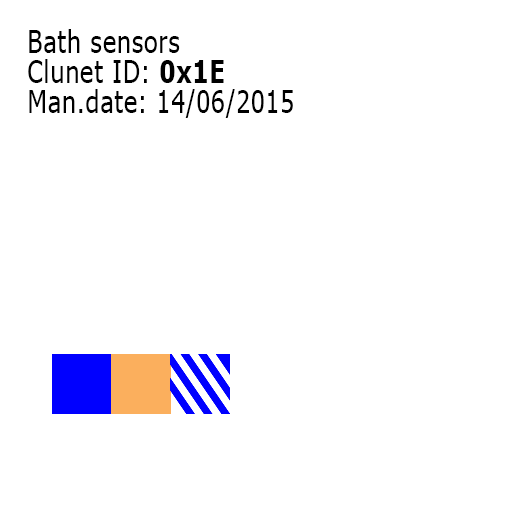
<style>
.page{position:relative;width:520px;height:520px;background:#ffffff}
.page>*{position:absolute;margin:0}
.t1{font:30.8px "Tahoma";letter-spacing:0.04em;color:#000000;scale:0.81 1}
.t2{font:30.8px "Tahoma-Bold";letter-spacing:0.04em;color:#000000;scale:0.81 1}
</style>
<div class="page">
<p class="t1" style="left:28px;top:29px;width:265px;height:89px">Bath sensors<br>Clunet ID: <span class="t2">0x1E<br></span>Man.date: 14/06/2015</p>
</div>
